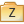
<style>
.page{position:relative;width:24px;height:24px}
.page>*{position:absolute;margin:0}
.t1{font:12px "MyriadPro-Regular";color:#363636}
</style>
<div class="page">
<p class="t1" style="left:9px;top:8px;width:7px;height:9px">Z</p>
</div>
